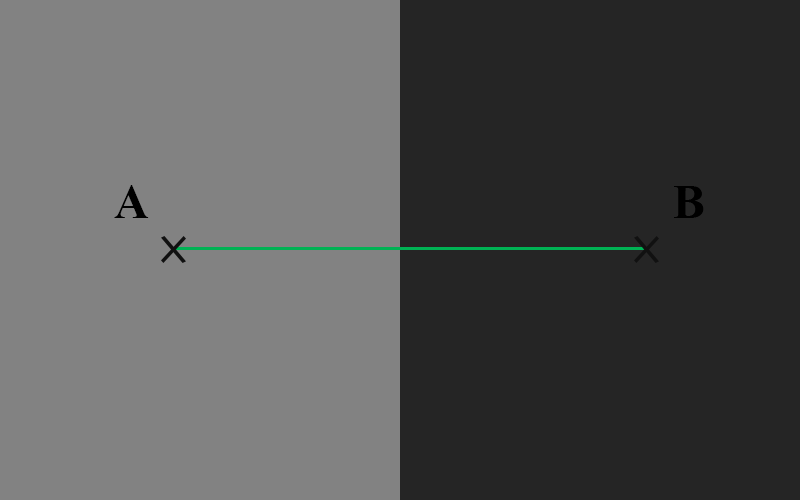
<style>
.page{position:relative;width:800px;height:500px;background:#828282}
.page>*{position:absolute;margin:0}
.t1{font:48px "TimesNewRomanPS-BoldMT";letter-spacing:0.05em;color:#000000}
</style>
<div class="page">
<p class="t1" style="left:114px;top:185px;width:35px;height:33px">A</p>
<p class="t1" style="left:674px;top:186px;width:30px;height:32px">B</p>
</div>
